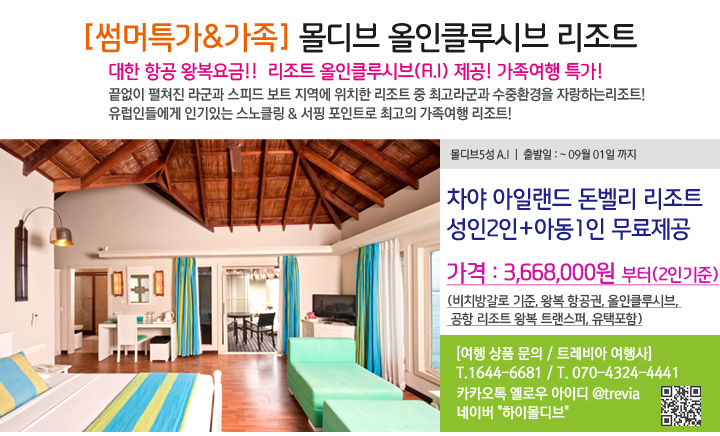
<style>
.page{position:relative;width:720px;height:436px;background:#ffffff}
.page>*{position:absolute;margin:0}
.t1{font:30.7px "NuriB";letter-spacing:-0.025em;color:#1b1b1b;scale:0.95 1}
.t2{font:30.7px "NuriB";letter-spacing:-0.025em;color:#eb6100;scale:0.95 1}
.t3{font:18px "NuriB";letter-spacing:-0.025em;color:#e4007f;scale:0.95 1}
.t4{font:14.6px/19.4px "RixGoB";letter-spacing:-0.025em;color:#4a4a4a;scale:0.95 1}
.t5{font:11.3px "RixGoM";letter-spacing:-0.025em;color:#303030;scale:0.95 1}
.t6{font:22.6px/30px "NuriB";letter-spacing:-0.025em;color:#1d2088;scale:0.95 1}
.t7{font:22.6px "NuriB";letter-spacing:-0.025em;color:#d212a4;text-decoration:underline;scale:0.95 1}
.t8{font:17px "NuriB";letter-spacing:-0.025em;color:#d212a4;text-decoration:underline;scale:0.95 1}
.t9{font:13px/18px "NuriB";letter-spacing:-0.025em;color:#434343;text-decoration:underline;scale:0.95 1}
.t10{font:14.6px/19.4px "RixGoM";letter-spacing:-0.025em;color:#ffffff;font-weight:bold;scale:0.95 1}
</style>
<div class="page">
<p class="t1" style="left:86px;top:23px;width:551px;height:30px"><span class="t2">[썸머특가&amp;가족] </span>몰디브 올인클루시브 리조트</p>
<p class="t3" style="left:109px;top:62px;width:493px;height:19px">대한 항공 왕복요금!!  리조트 올인클루시브(A.I) 제공! 가족여행 특가!</p>
<p class="t4" style="left:108px;top:87px;width:537px;height:34px">끝없이 펼쳐진 라군과 스피드 보트 지역에 위치한 리조트 중 최고라군과 수중환경을 자랑하는리조트!<br>유럽인들에게 인기있는 스노클링 &amp; 서핑 포인트로 최고의 가족여행 리조트!</p>
<p class="t5" style="left:450px;top:148px;width:186px;height:12px">몰디브5성 A.I  |  출발일 : ~ 09월 01일 까지</p>
<p class="t6" style="left:446px;top:188px;width:257px;height:53px">차야 아일랜드 돈벨리 리조트<br>성인2인+아동1인 무료제공</p>
<p class="t7" style="left:446px;top:262px;width:273px;height:24px">가격 : 3,668,000원 <span class="t8">부터(2인기준)</span></p>
<p class="t9" style="left:447px;top:294px;width:235px;height:32px">(비치방갈로 기준, 왕복 항공권, 올인클루시브, <br> 공항 리조트 왕복 트랜스퍼, 유택포함)</p>
<p class="t10" style="left:456px;top:346px;width:221px;height:34px">[여행 상품 문의 / 트레비아 여행사]<br>T.1644-6681 / T. 070-4324-4441</p>
<p class="t10" style="left:457px;top:386px;width:183px;height:34px">카카오톡 옐로우 아이디 @trevia<br>네이버 "하이몰디브"</p>
</div>
